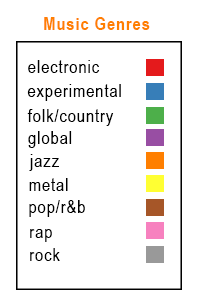
<style>
.page{position:relative;width:200px;height:308px;background:#ffffff}
.page>*{position:absolute;margin:0}
.t1{font:18px "ArialNarrow-Bold";letter-spacing:0.05em;color:#ff7f00}
.t2{font:18px "ArialNarrow";letter-spacing:0.05em;color:#000000}
</style>
<div class="page">
<p class="t1" style="left:44px;top:17px;width:106px;height:13px">Music Genres</p>
<p class="t2" style="left:28px;top:60px;width:72px;height:13px">electronic</p>
<p class="t2" style="left:27px;top:84px;width:94px;height:17px">experimental</p>
<p class="t2" style="left:27px;top:109px;width:87px;height:17px">folk/country</p>
<p class="t2" style="left:28px;top:131px;width:44px;height:17px">global</p>
<p class="t2" style="left:29px;top:154px;width:30px;height:17px">jazz</p>
<p class="t2" style="left:29px;top:178px;width:39px;height:13px">metal</p>
<p class="t2" style="left:29px;top:200px;width:56px;height:17px">pop/r&amp;b</p>
<p class="t2" style="left:30px;top:229px;width:22px;height:13px">rap</p>
<p class="t2" style="left:30px;top:248px;width:30px;height:13px">rock</p>
</div>
